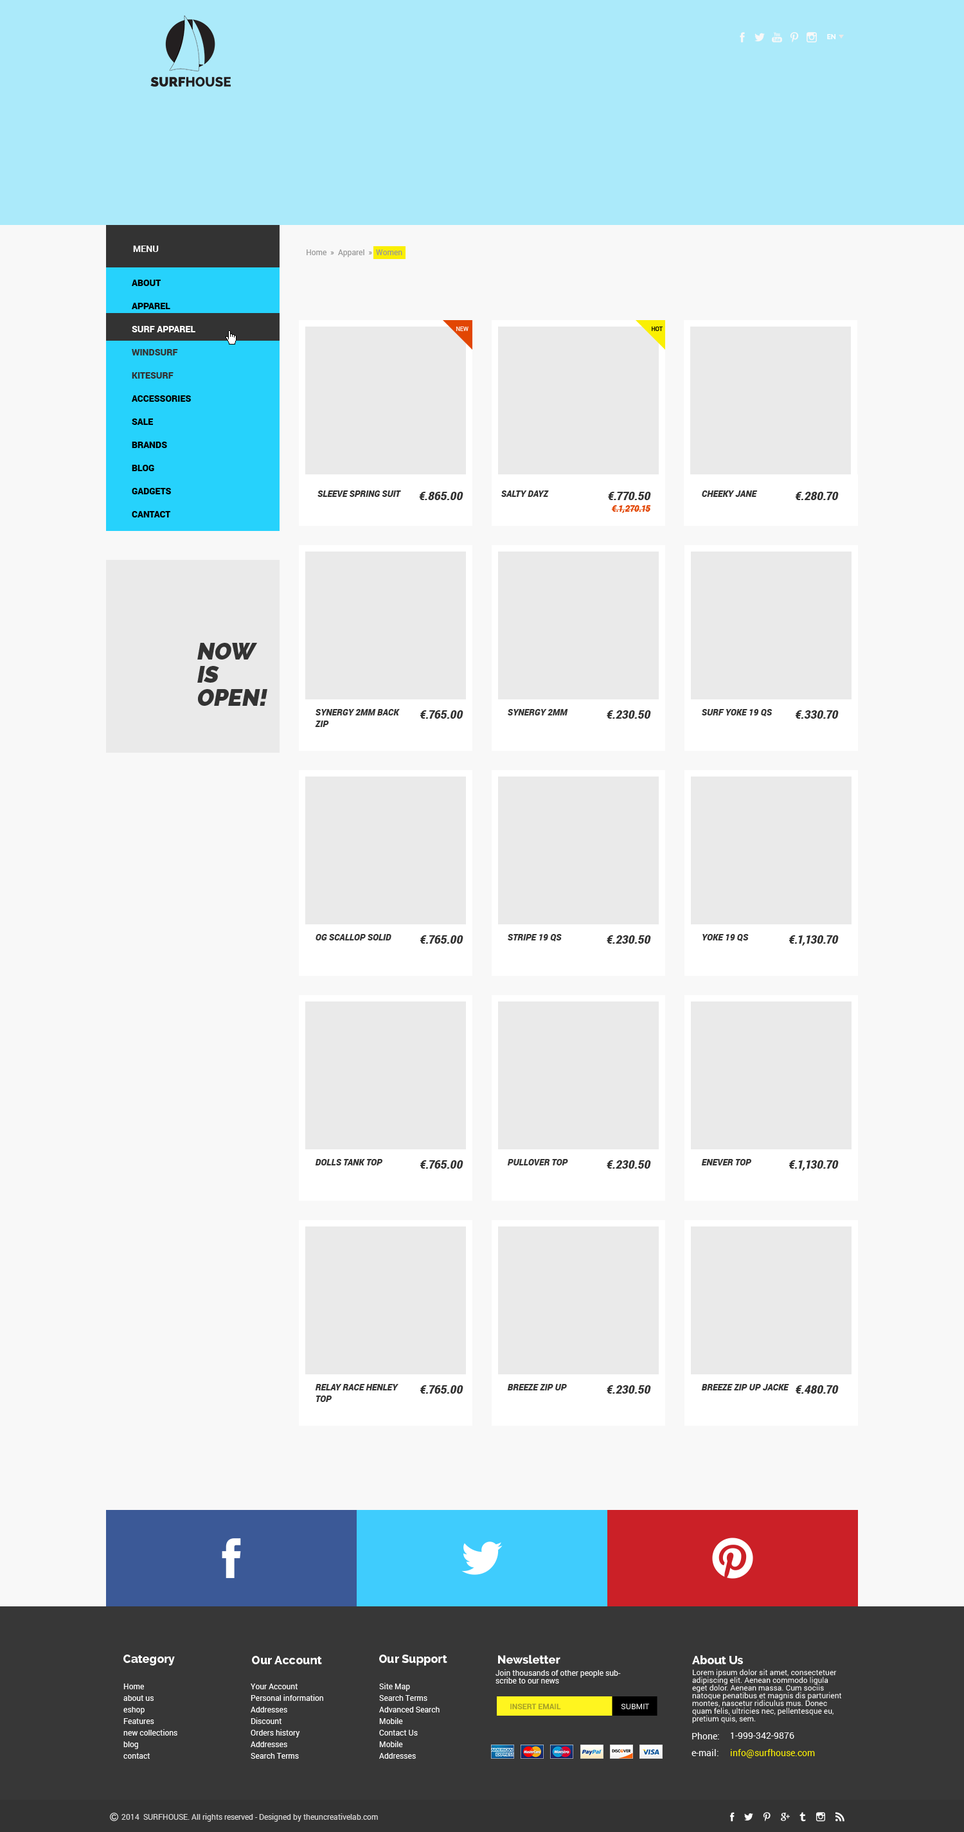
<style>
.page{position:relative;width:964px;height:1832px;background:#f8f8f8}
.page>*{position:absolute;margin:0}
.t1{font:6.4px "Raleway-Bold";letter-spacing:0.025em;color:#ffffff}
.t2{font:9px "Roboto-Bold";color:#ffffff;text-transform:uppercase}
.t3{font:7.7px "Roboto-Regular";color:#989898}
.t4{font:9px/23.1px "Roboto-Black";color:#000000;text-transform:uppercase}
.t5{font:9px/23.1px "Roboto-Black";color:#ffffff;text-transform:uppercase}
.t6{font:9px/23.1px "Roboto-Black";color:#333333;text-transform:uppercase}
.t7{font:5.8px "Roboto-Regular";color:#ffffff}
.t8{font:5.8px "Roboto-Regular";color:#000000}
.t9{font:9px "Roboto-BlackItalic";color:#333333}
.t10{font:11.6px "Roboto-BlackItalic";color:#333333}
.t11{font:9px "Roboto-BlackItalic";color:#e24602}
.t12{font:23.1px/23.1px "Raleway-Heavy";color:#333333;text-transform:uppercase;font-style:italic}
.t13{font:9px/11.6px "Roboto-BlackItalic";color:#333333}
.t14{font:11.6px "Raleway-ExtraBold";color:#ffffff}
.t15{font:7.7px/7.7px "Roboto-Regular";color:#f8f8f8}
.t16{font:7.7px/7.7px "Roboto-Regular";color:#ffffff}
.t17{font:7.7px/11.6px "Roboto-Regular";color:#ffffff}
.t18{font:7.7px "Roboto-Bold";color:#a39e28;text-transform:uppercase}
.t19{font:7.7px "Roboto-Regular";color:#ffffff;text-transform:uppercase}
.t20{font:9px "Roboto-Regular";color:#ffffff}
.t21{font:9px "Roboto-Regular";color:#faef03}
.t22{font:7.7px "Roboto-Regular";color:#dad9d9}
</style>
<div class="page">
<p class="t1" style="left:827px;top:34px;width:9px;height:5px">EN</p>
<p class="t2" style="left:133px;top:246px;width:26px;height:6px">Menu</p>
<p class="t3" style="left:307px;top:249px;width:95px;height:8px">Home  »  Apparel  »  Women</p>
<p class="t4" style="left:132px;top:280px;width:63px;height:238px">About<br>apparel<br><span class="t5">surf apparel          <br></span><span class="t6">windsurf       <br>kitesurf<br></span>accessories<br>sale<br>brands<br>blog<br>Gadgets<br>cantact<br>Electronic Gadgets</p>
<p class="t7" style="left:456px;top:327px;width:13px;height:4px">NEW</p>
<p class="t8" style="left:652px;top:327px;width:11px;height:4px">HOT</p>
<p class="t9" style="left:318px;top:491px;width:83px;height:6px">SLEEVE SPRING SUIT</p>
<p class="t10" style="left:419px;top:492px;width:45px;height:8px">€.865.00</p>
<p class="t9" style="left:501px;top:491px;width:48px;height:6px">SALTY DAYZ</p>
<p class="t10" style="left:608px;top:492px;width:43px;height:8px">€.770.50</p>
<p class="t9" style="left:702px;top:491px;width:56px;height:6px">CHEEKY JANE</p>
<p class="t10" style="left:795px;top:492px;width:44px;height:8px">€.280.70</p>
<p class="t11" style="left:611px;top:505px;width:40px;height:8px">€.1,270.15</p>
<p class="t12" style="left:197px;top:643px;width:70px;height:63px">Now<br>is<br>open!</p>
<p class="t13" style="left:315px;top:709px;width:85px;height:18px">SYNERGY 2MM BACK ZIP</p>
<p class="t10" style="left:420px;top:710px;width:44px;height:9px">€.765.00</p>
<p class="t9" style="left:508px;top:709px;width:60px;height:7px">SYNERGY 2MM BACK ZI</p>
<p class="t10" style="left:607px;top:710px;width:44px;height:9px">€.230.50</p>
<p class="t9" style="left:702px;top:709px;width:70px;height:8px">SURF YOKE 19 QS</p>
<p class="t10" style="left:795px;top:710px;width:44px;height:9px">€.330.70</p>
<p class="t9" style="left:316px;top:934px;width:76px;height:7px">OG SCALLOP SOLID</p>
<p class="t10" style="left:420px;top:935px;width:44px;height:9px">€.765.00</p>
<p class="t9" style="left:508px;top:934px;width:54px;height:8px">STRIPE 19 QS</p>
<p class="t10" style="left:607px;top:935px;width:44px;height:9px">€.230.50</p>
<p class="t9" style="left:703px;top:934px;width:46px;height:8px">YOKE 19 QS</p>
<p class="t10" style="left:789px;top:935px;width:50px;height:11px">€.1,130.70</p>
<p class="t9" style="left:315px;top:1159px;width:68px;height:7px">DOLLS TANK TOP</p>
<p class="t10" style="left:420px;top:1160px;width:44px;height:9px">€.765.00</p>
<p class="t9" style="left:507px;top:1159px;width:61px;height:7px">PULLOVER TOP</p>
<p class="t10" style="left:607px;top:1160px;width:44px;height:9px">€.230.50</p>
<p class="t9" style="left:701px;top:1159px;width:51px;height:7px">ENEVER TOP</p>
<p class="t10" style="left:789px;top:1160px;width:50px;height:11px">€.1,130.70</p>
<p class="t13" style="left:315px;top:1384px;width:84px;height:18px">RELAY RACE HENLEY TOP</p>
<p class="t10" style="left:420px;top:1385px;width:44px;height:9px">€.765.00</p>
<p class="t9" style="left:507px;top:1384px;width:60px;height:7px">BREEZE ZIP UP</p>
<p class="t10" style="left:607px;top:1385px;width:44px;height:9px">€.230.50</p>
<p class="t9" style="left:701px;top:1384px;width:88px;height:7px">BREEZE ZIP UP JACKE</p>
<p class="t10" style="left:796px;top:1385px;width:43px;height:9px">€.480.70</p>
<p class="t14" style="left:123px;top:1655px;width:52px;height:11px">Category</p>
<p class="t14" style="left:252px;top:1656px;width:70px;height:8px">Our Account</p>
<p class="t14" style="left:379px;top:1655px;width:68px;height:11px">Our Support</p>
<p class="t14" style="left:498px;top:1655px;width:63px;height:9px">Newsletter</p>
<p class="t14" style="left:692px;top:1655px;width:51px;height:9px">About Us</p>
<p class="t15" style="left:496px;top:1670px;width:125px;height:14px">Join thousands of other people subscribe to our news</p>
<p class="t16" style="left:692px;top:1669px;width:150px;height:55px">Lorem ipsum dolor sit amet, consectetuer adipiscing elit. Aenean commodo ligula eget dolor. Aenean massa. Cum sociis natoque penatibus et magnis dis parturient montes, nascetur ridiculus mus. Donec quam felis, ultricies nec, pellentesque eu, pretium quis, sem.</p>
<p class="t17" style="left:123px;top:1684px;width:54px;height:75px">Home<br>about us<br>eshop<br>Features<br>new collections<br>blog<br>contact</p>
<p class="t17" style="left:251px;top:1684px;width:72px;height:75px">Your Account<br>Personal information<br>Addresses<br>Discount<br>Orders history<br>Addresses<br>Search Terms</p>
<p class="t17" style="left:379px;top:1683px;width:61px;height:76px">Site Map<br>Search Terms<br>Advanced Search<br>Mobile<br>Contact Us<br>Mobile<br>Addresses</p>
<p class="t18" style="left:510px;top:1704px;width:51px;height:5px">insert email</p>
<p class="t19" style="left:621px;top:1704px;width:28px;height:5px">Submit</p>
<p class="t20" style="left:692px;top:1733px;width:27px;height:7px">Phone:</p>
<p class="t20" style="left:731px;top:1733px;width:64px;height:6px">1-999-342-9876</p>
<p class="t20" style="left:692px;top:1749px;width:27px;height:7px">e-mail:</p>
<p class="t21" style="left:731px;top:1749px;width:84px;height:9px">info@surfhouse.com</p>
<p class="t22" style="left:122px;top:1814px;width:256px;height:8px">2014  SURFHOUSE. All rights reserved - Designed by theuncreativelab.com</p>
</div>
